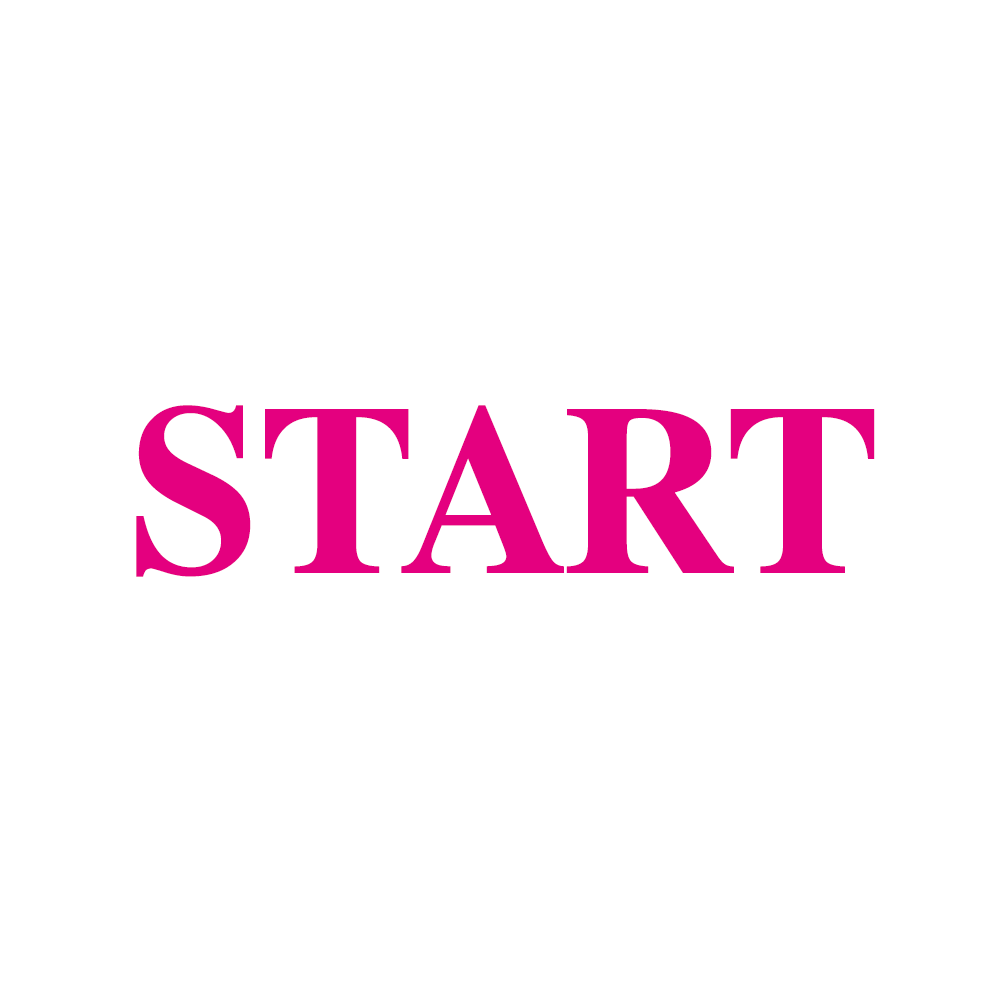
<style>
.page{position:relative;width:1000px;height:1000px;background:#ffffff}
.page>*{position:absolute;margin:0}
.t1{font:241.2px "Dutch801BT-Bold";color:#e4007f}
</style>
<div class="page">
<p class="t1" style="left:136px;top:405px;width:739px;height:172px">START</p>
</div>
